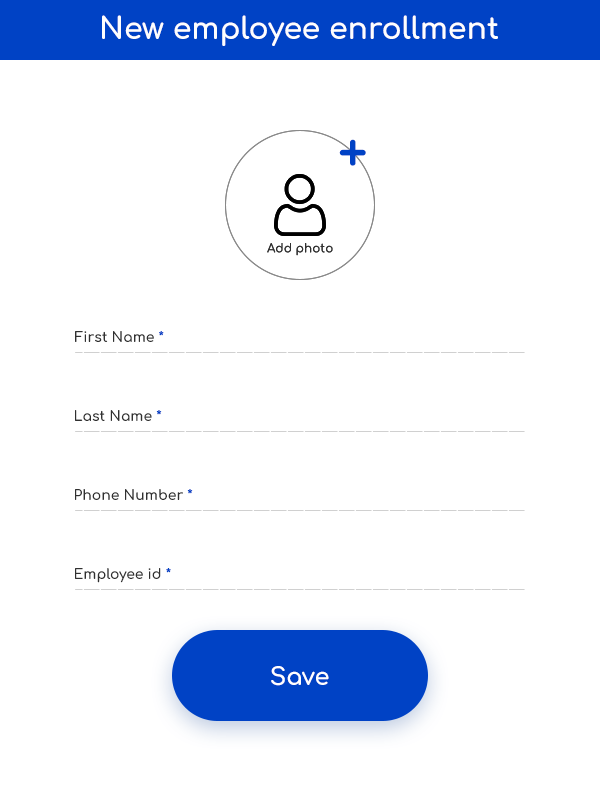
<style>
.page{position:relative;width:600px;height:800px;background:#ffffff}
.page>*{position:absolute;margin:0}
.t1{font:30px "Comfortaa-Bold";color:#fefefe}
.t2{font:54.8px "Comfortaa-Bold";color:#0042c5}
.t3{font:12px "Comfortaa-Bold";color:#303030}
.t4{font:14px "Comfortaa-Bold";color:#303030}
.t5{font:14px "Comfortaa-Bold";color:#0042c5}
.t6{font:24px "Comfortaa-Bold";color:#ffffff}
</style>
<div class="page">
<p class="t1" style="left:102px;top:15px;width:396px;height:31px">New employee enrollment</p>
<p class="t2" style="left:339px;top:139px;width:27px;height:27px">+</p>
<p class="t3" style="left:267px;top:243px;width:66px;height:13px">Add photo</p>
<p class="t3" style="left:267px;top:243px;width:66px;height:13px">Add photo</p>
<p class="t4" style="left:75px;top:331px;width:89px;height:11px">First Name <span class="t5">*</span></p>
<p class="t4" style="left:75px;top:410px;width:87px;height:11px">Last Name <span class="t5">*</span></p>
<p class="t4" style="left:75px;top:489px;width:118px;height:11px">Phone Number <span class="t5">*</span></p>
<p class="t4" style="left:75px;top:568px;width:96px;height:15px">Employee id <span class="t5">*</span></p>
<p class="t6" style="left:271px;top:666px;width:58px;height:20px">Save</p>
</div>
